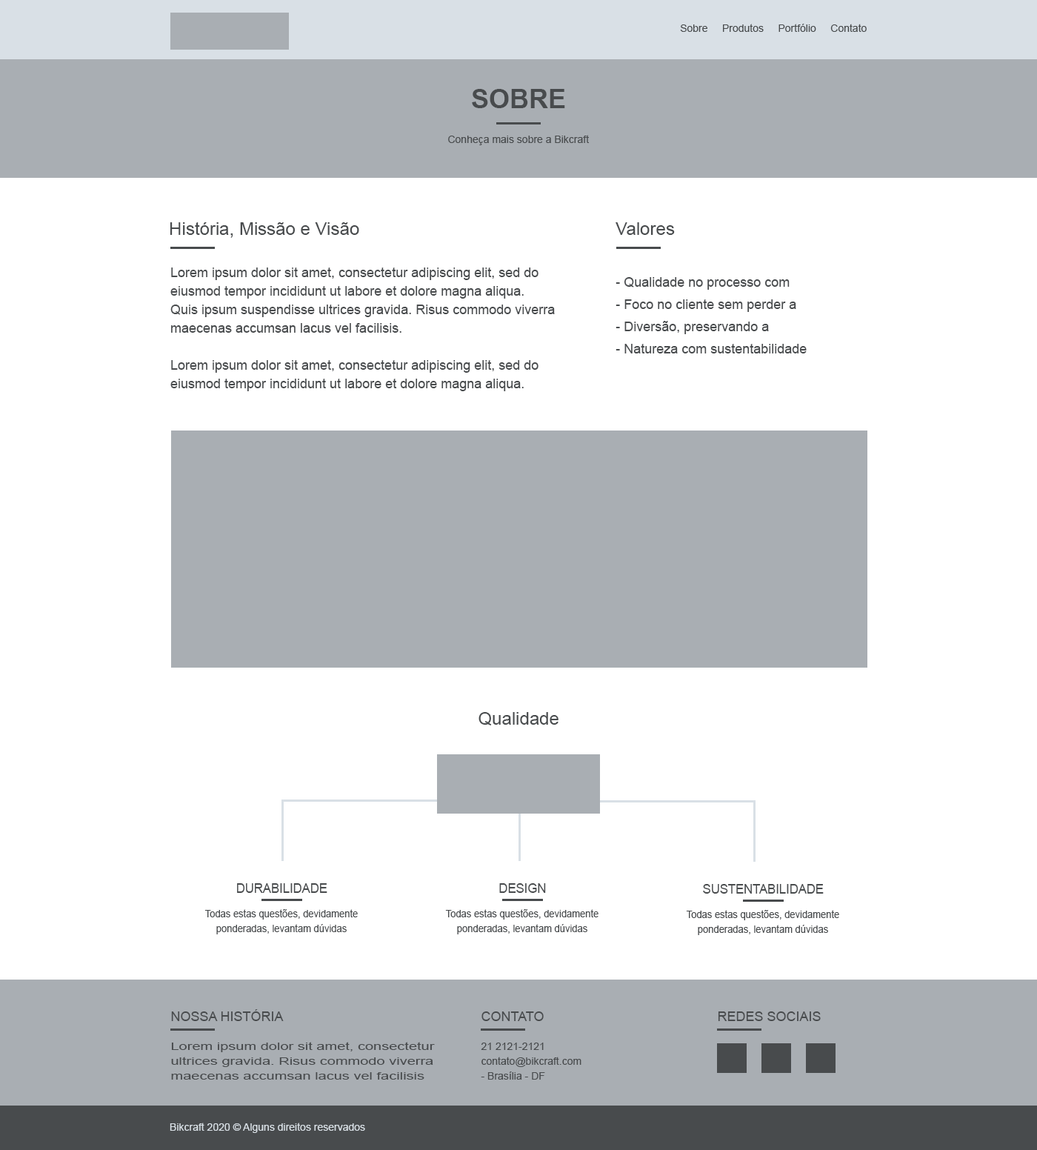
<style>
.page{position:relative;width:1037px;height:1150px;background:#ffffff}
.page>*{position:absolute;margin:0}
.t1{font:10.4px "ArialMT";color:#484b4d}
.t2{font:26.7px "Arial-BoldMT";color:#484b4d;text-transform:uppercase}
.t3{font:17.8px "ArialMT";color:#484b4d}
.t4{font:13.3px/18.5px "ArialMT";color:#484b4d}
.t5{font:13.3px/22.2px "ArialMT";color:#484b4d}
.t6{font:13.4px "ArialMT";color:#484b4d;text-transform:uppercase;scale:0.92 1}
.t7{font:10.4px/14.9px "ArialMT";color:#484b4d;scale:0.92 1}
.t8{font:13.3px "ArialMT";color:#484b4d;text-transform:uppercase}
.t9{font:10.4px/14.8px "ArialMT";color:#484b4d;scale:1.43 1}
.t10{font:10.4px/14.8px "ArialMT";color:#484b4d}
.t11{font:10.4px "ArialMT";color:#d9e0e6}
</style>
<div class="page">
<p class="t1" style="left:680px;top:24px;width:187px;height:8px">Sobre     Produtos     Portfólio     Contato</p>
<p class="t2" style="left:472px;top:89px;width:93px;height:19px">SOBRE</p>
<p class="t1" style="left:448px;top:135px;width:142px;height:10px">Conheça mais sobre a Bikcraft</p>
<p class="t3" style="left:170px;top:222px;width:189px;height:16px">História, Missão e Visão</p>
<p class="t3" style="left:616px;top:222px;width:59px;height:13px">Valores</p>
<p class="t4" style="left:170px;top:267px;width:385px;height:124px">Lorem ipsum dolor sit amet, consectetur adipiscing elit, sed do eiusmod tempor incididunt ut labore et dolore magna aliqua. Quis ipsum suspendisse ultrices gravida. Risus commodo viverra maecenas accumsan lacus vel facilisis.<br><br>Lorem ipsum dolor sit amet, consectetur adipiscing elit, sed do eiusmod tempor incididunt ut labore et dolore magna aliqua.</p>
<p class="t5" style="left:616px;top:277px;width:191px;height:76px">- Qualidade no processo com<br>- Foco no cliente sem perder a <br>- Diversão, preservando a <br>- Natureza com sustentabilidade</p>
<p class="t3" style="left:479px;top:712px;width:80px;height:13px">Qualidade</p>
<p class="t6" style="left:237px;top:883px;width:90px;height:10px">Durabilidade</p>
<p class="t6" style="left:499px;top:883px;width:47px;height:10px">design</p>
<p class="t6" style="left:703px;top:884px;width:121px;height:9px">sustentabilidade</p>
<p class="t7" style="left:204px;top:909px;width:154px;height:25px;text-align:center">Todas estas questões, devidamente ponderadas, levantam dúvidas</p>
<p class="t7" style="left:445px;top:909px;width:154px;height:25px;text-align:center">Todas estas questões, devidamente ponderadas, levantam dúvidas</p>
<p class="t7" style="left:686px;top:910px;width:153px;height:25px;text-align:center">Todas estas questões, devidamente ponderadas, levantam dúvidas</p>
<p class="t8" style="left:171px;top:1009px;width:113px;height:12px">Nossa História</p>
<p class="t8" style="left:482px;top:1011px;width:62px;height:10px">contato</p>
<p class="t8" style="left:718px;top:1011px;width:103px;height:10px">redes sociais</p>
<p class="t9" style="left:171px;top:1042px;width:264px;height:37px">Lorem ipsum dolor sit amet, consectetur ultrices gravida. Risus commodo viverra maecenas accumsan lacus vel facilisis</p>
<p class="t10" style="left:481px;top:1042px;width:101px;height:37px">21 2121-2121<br>contato@bikcraft.com<br>- Brasília - DF</p>
<p class="t11" style="left:170px;top:1122px;width:195px;height:11px">Bikcraft 2020 © Alguns direitos reservados</p>
</div>
